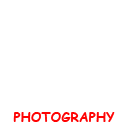
<style>
.page{position:relative;width:128px;height:128px;background:#ffffff}
.page>*{position:absolute;margin:0}
.t1{font:13.3px "ComicSansMS-Bold";color:#fe0303}
</style>
<div class="page">
<p class="t1" style="left:13px;top:112px;width:102px;height:10px">PHOTOGRAPHY</p>
</div>
